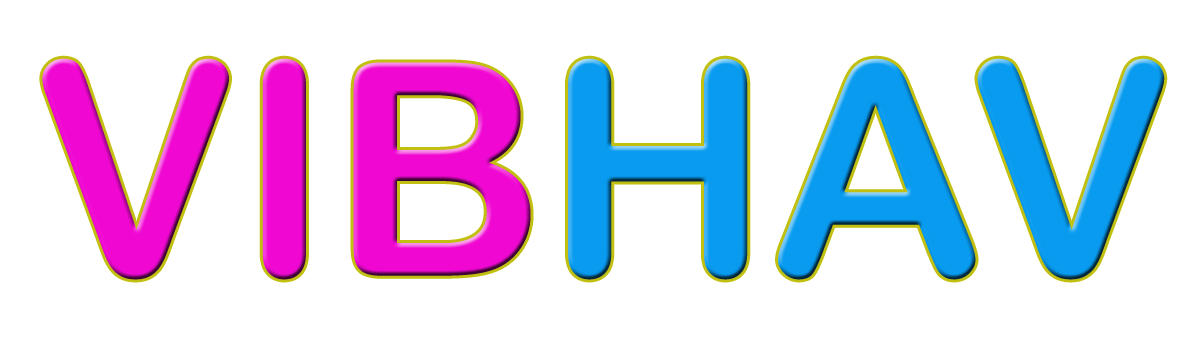
<style>
.page{position:relative;width:1200px;height:360px;background:#ffffff}
.page>*{position:absolute;margin:0}
.t1{font:297.5px "ArialRoundedMTBold";color:#f008d2}
.t2{font:297.5px "ArialRoundedMTBold";color:#089bf0}
</style>
<div class="page">
<p class="t1" style="left:42px;top:58px;width:1123px;height:222px">VIB<span class="t2">HAV</span></p>
</div>
